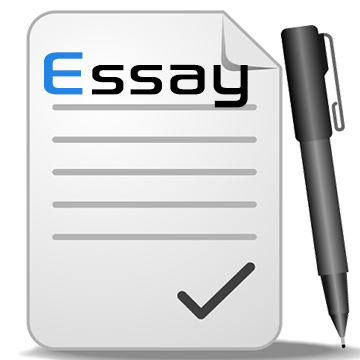
<style>
.page{position:relative;width:360px;height:360px;background:#ffffff}
.page>*{position:absolute;margin:0}
.t1{font:80px "SonySketchEF";color:#000000}
.t2{font:86px "SonySketchEF";color:#2384e1}
</style>
<div class="page">
<p class="t1" style="left:44px;top:52px;width:204px;height:56px"><span class="t2">E</span>ssay</p>
</div>
